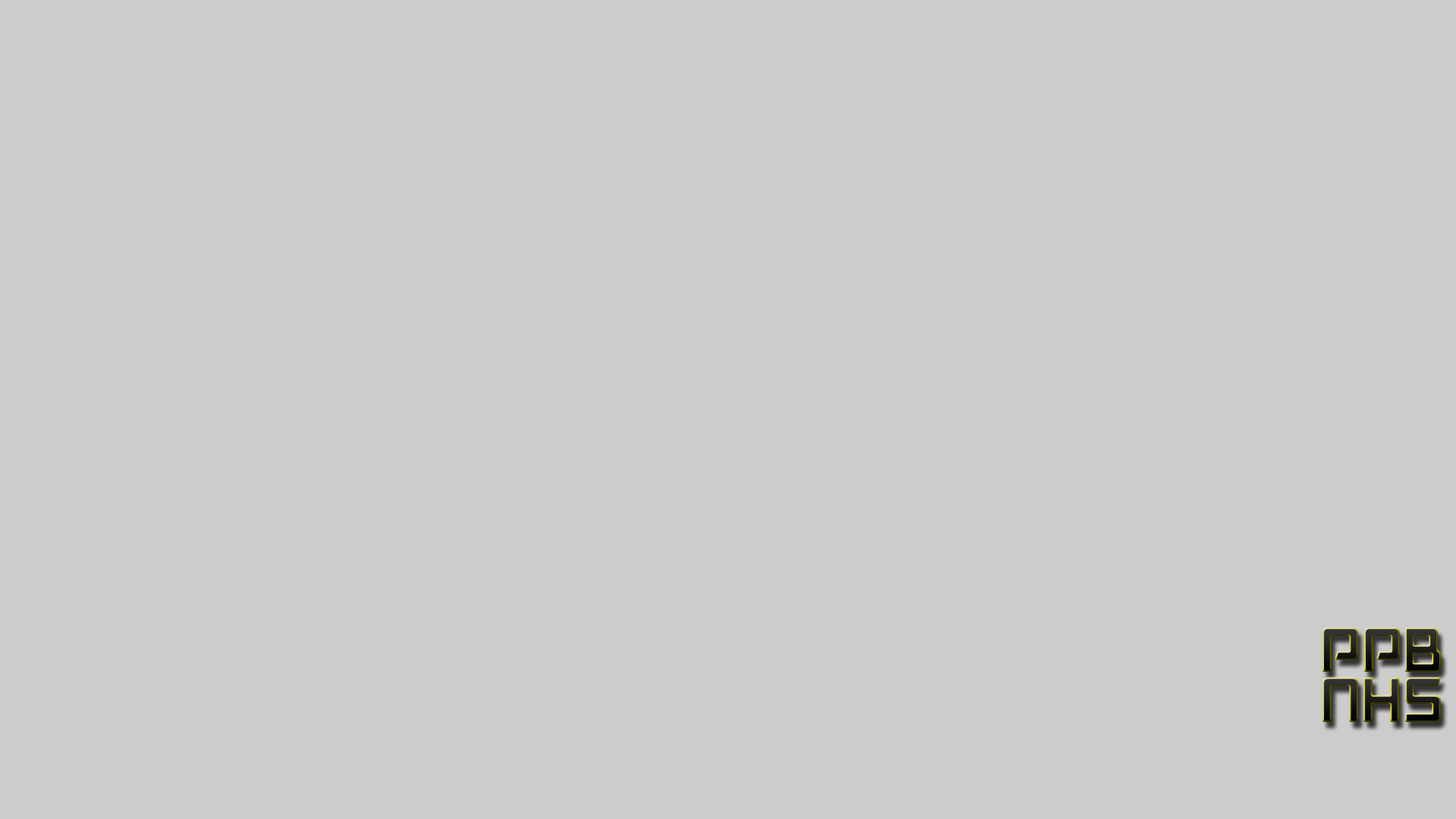
<style>
.page{position:relative;width:1456px;height:819px;background:#cccccc}
.page>*{position:absolute;margin:0}
.t1{font:60.7px "Akashi"}
</style>
<div class="page">
<p class="t1" style="left:1323px;top:627px;width:118px;height:45px">PPB</p>
<p class="t1" style="left:1323px;top:677px;width:118px;height:45px">NHS</p>
</div>
